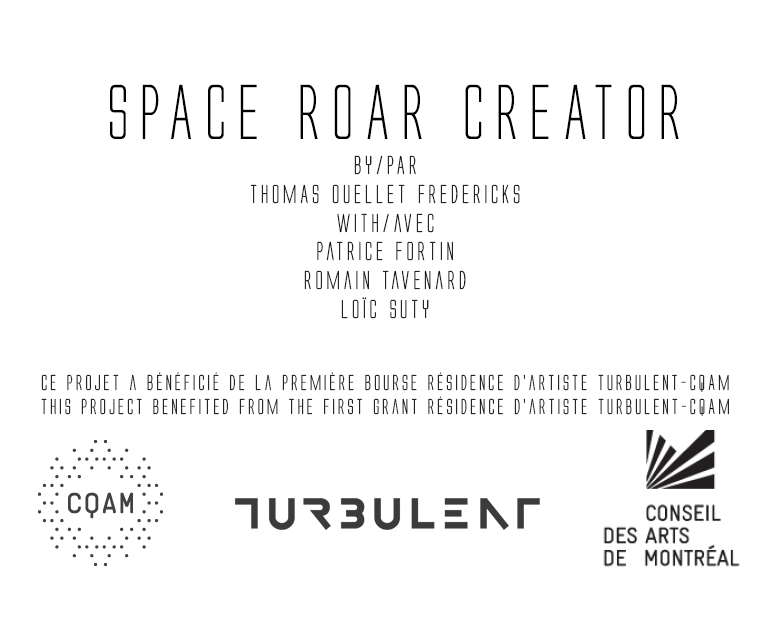
<style>
.page{position:relative;width:770px;height:638px;background:#ffffff}
.page>*{position:absolute;margin:0}
.t1{font:72px "AlienLeague";color:#000000}
.t2{font:24px "AlienLeague";color:#000000}
.t3{font:20px "AlienLeague";color:#000000}
</style>
<div class="page">
<p class="t1" style="left:110px;top:84px;width:569px;height:55px">SPACE ROAR CREATOR</p>
<p class="t2" style="left:250px;top:155px;width:270px;height:164px;text-align:center">by/PAR<br>THOMAS OUELLET FREDERiCKS<br>with/avec<br>Patrice Fortin<br>Romain Tavenard<br>Loïc Suty</p>
<p class="t3" style="left:41px;top:372px;width:688px;height:44px;text-align:center">ce projet a bénéficié de la première bourse Résidence d'artiste Turbulent-CQAM<br>This project benefited from the first grant Résidence d'artiste Turbulent-CQAM</p>
</div>
